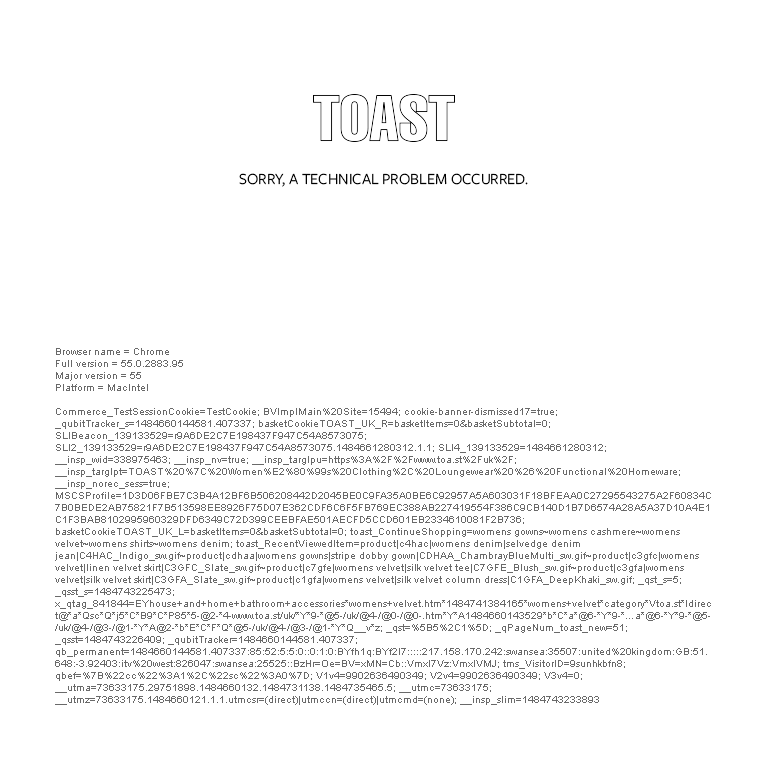
<style>
.page{position:relative;width:768px;height:768px;background:#ffffff}
.page>*{position:absolute;margin:0}
.t1{font:16px "FreightSansProBook-Regular";color:#000000}
.t2{font:10px/12px "ArialMT";color:#696969}
</style>
<div class="page">
<p class="t1" style="left:239px;top:173px;width:289px;height:14px">SORRY, A TECHNICAL PROBLEM OCCURRED.</p>
<p class="t2" style="left:55px;top:348px;width:656px;height:357px">Browser name = Chrome<br>Full version = 55.0.2883.95<br>Major version = 55<br>Platform = MacIntel<br><br>Commerce_TestSessionCookie=TestCookie; BVImplMain%20Site=15494; cookie-banner-dismissed17=true; _qubitTracker_s=1484660144581.407337; basketCookieTOAST_UK_R=basketItems=0&amp;basketSubtotal=0; SLIBeacon_139133529=r9A6DE2C7E198437F947C54A8573075; SLI2_139133529=r9A6DE2C7E198437F947C54A8573075.1484661280312.1.1; SLI4_139133529=1484661280312; __insp_wid=338975463; __insp_nv=true; __insp_targlpu=https%3A%2F%2Fwww.toa.st%2Fuk%2F; __insp_targlpt=TOAST%20%7C%20Women%E2%80%99s%20Clothing%2C%20Loungewear%20%26%20Functional%20Homeware; __insp_norec_sess=true; MSCSProfile=1D3D06FBE7C3B4A12BF6B506208442D2045BE0C9FA35A0BE6C92957A5A603031F18BFEAA0C27295543275A2F60834C7B0BEDE2AB75821F7B513598EE8926F75D07E362CDF6C6F5FB769EC388AB227419554F386C9CB140D1B7D6574A28A5A37D10A4E1C1F3BAB8102995960329DFD6349C72D399CEEBFAE501AECFD5CCD601EB2334610081F2B736; basketCookieTOAST_UK_L=basketItems=0&amp;basketSubtotal=0; toast_ContinueShopping=womens gowns~womens cashmere~womens velvet~womens shirts~womens denim; toast_RecentViewedItem=product|c4hac|womens denim|selvedge denim jean|C4HAC_Indigo_sw.gif~product|cdhaa|womens gowns|stripe dobby gown|CDHAA_ChambrayBlueMulti_sw.gif~product|c3gfc|womens velvet|linen velvet skirt|C3GFC_Slate_sw.gif~product|c7gfe|womens velvet|silk velvet tee|C7GFE_Blush_sw.gif~product|c3gfa|womens velvet|silk velvet skirt|C3GFA_Slate_sw.gif~product|c1gfa|womens velvet|silk velvet column dress|C1GFA_DeepKhaki_sw.gif; _qst_s=5; _qsst_s=1484743225473; x_qtag_841844=EYhouse+and+home+bathroom+accessories*womens+velvet.htm*1484741384165*womens+velvet*category*Vtoa.st*Idirect@*a*Qsc*Q*j5*C*B9*C*P85*5-@2-*4-www.toa.st/uk/*Y*9-*@5-/uk/@4-/@0-/@0-.htm*Y*A1484660143529*b*C*a*@6-*Y*9-*…a*@6-*Y*9-*@5-/uk/@4-/@3-/@1-*Y*A@2-*b*E*C*F*Q*@5-/uk/@4-/@3-/@1-*Y*Q__v*z; _qst=%5B5%2C1%5D; _qPageNum_toast_new=51; _qsst=1484743226409; _qubitTracker=1484660144581.407337; qb_permanent=1484660144581.407337:85:52:5:5:0::0:1:0:BYfh1q:BYf2I7:::::217.158.170.242:swansea:35507:united%20kingdom:GB:51.648:-3.92403:itv%20west:826047:swansea:25525::BzHr=Oe=BV=xMN=Cb::Vmxl7Vz:VmxIVMJ; tms_VisitorID=9sunhkbfn8; qbef=%7B%22cc%22%3A1%2C%22sc%22%3A0%7D; V1v4=9902636490349; V2v4=9902636490349; V3v4=0; __utma=73633175.29751898.1484660132.1484731138.1484735465.5; __utmc=73633175; __utmz=73633175.1484660121.1.1.utmcsr=(direct)|utmccn=(direct)|utmcmd=(none); __insp_slim=1484743233893</p>
</div>
